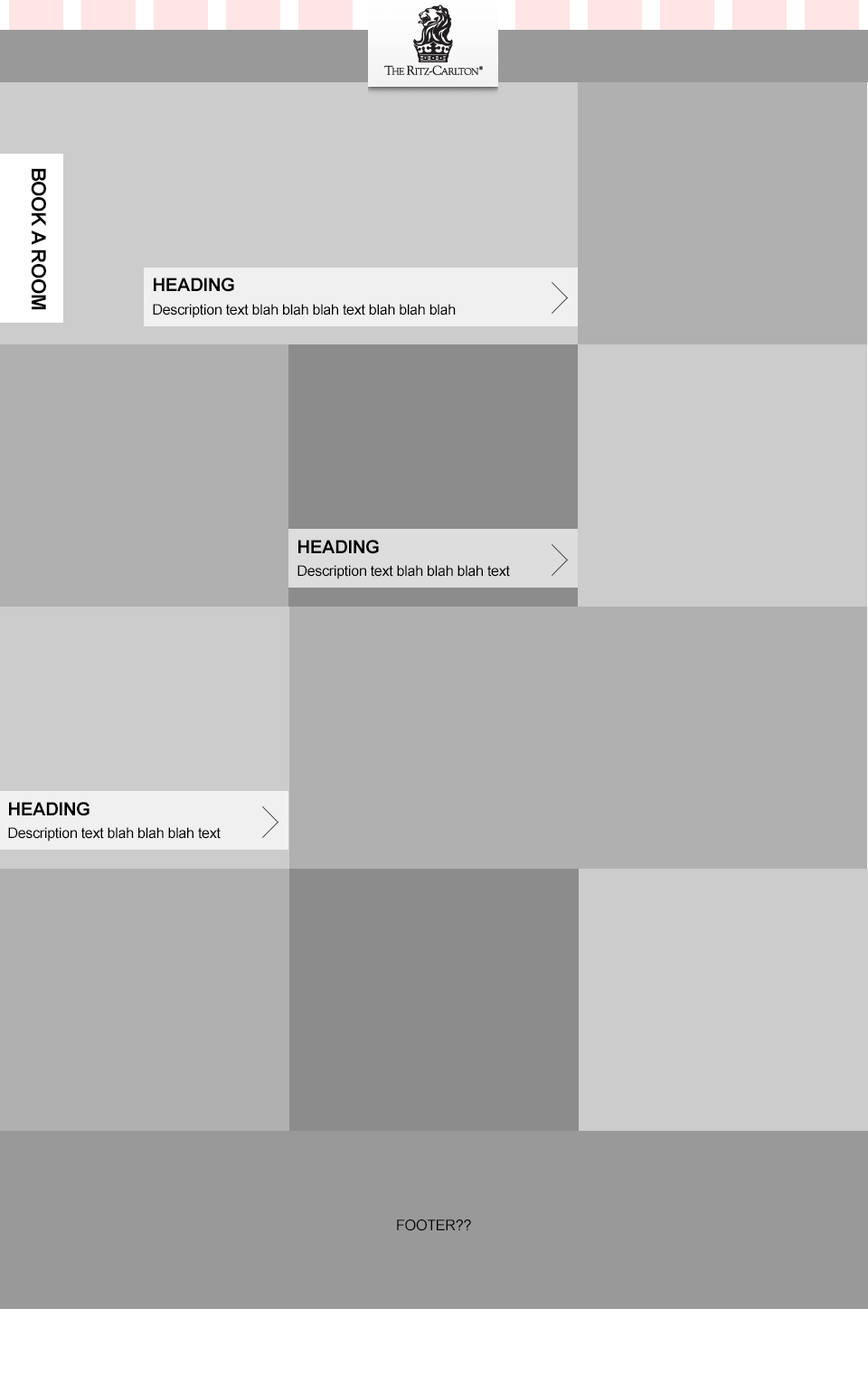
<style>
.page{position:relative;width:868px;height:1374px;background:#b0b0b0}
.page>*{position:absolute;margin:0}
.t1{font:19.9px "Arial-BoldMT";letter-spacing:-0.025em;color:#010101}
.t2{font:18.1px "Arial-BoldMT";letter-spacing:-0.025em;color:#010101}
.t3{font:14.5px "ArialMT";letter-spacing:-0.025em;color:#010101}
.t4{font:14.8px "ArialMT";letter-spacing:-0.025em;color:#000000}
</style>
<div class="page">
<p class="t1" style="left:31px;top:168px;width:15px;height:142px;rotate:90deg">BOOK A ROOM</p>
<p class="t2" style="left:154px;top:278px;width:80px;height:14px">HEADING</p>
<p class="t3" style="left:153px;top:304px;width:303px;height:14px">Description text blah blah blah text blah blah blah</p>
<p class="t2" style="left:298px;top:540px;width:81px;height:14px">HEADING</p>
<p class="t3" style="left:297px;top:565px;width:213px;height:14px">Description text blah blah blah text</p>
<p class="t2" style="left:9px;top:802px;width:80px;height:14px">HEADING</p>
<p class="t3" style="left:8px;top:827px;width:213px;height:15px">Description text blah blah blah text</p>
<p class="t4" style="left:397px;top:1219px;width:74px;height:12px">FOOTER??</p>
</div>
